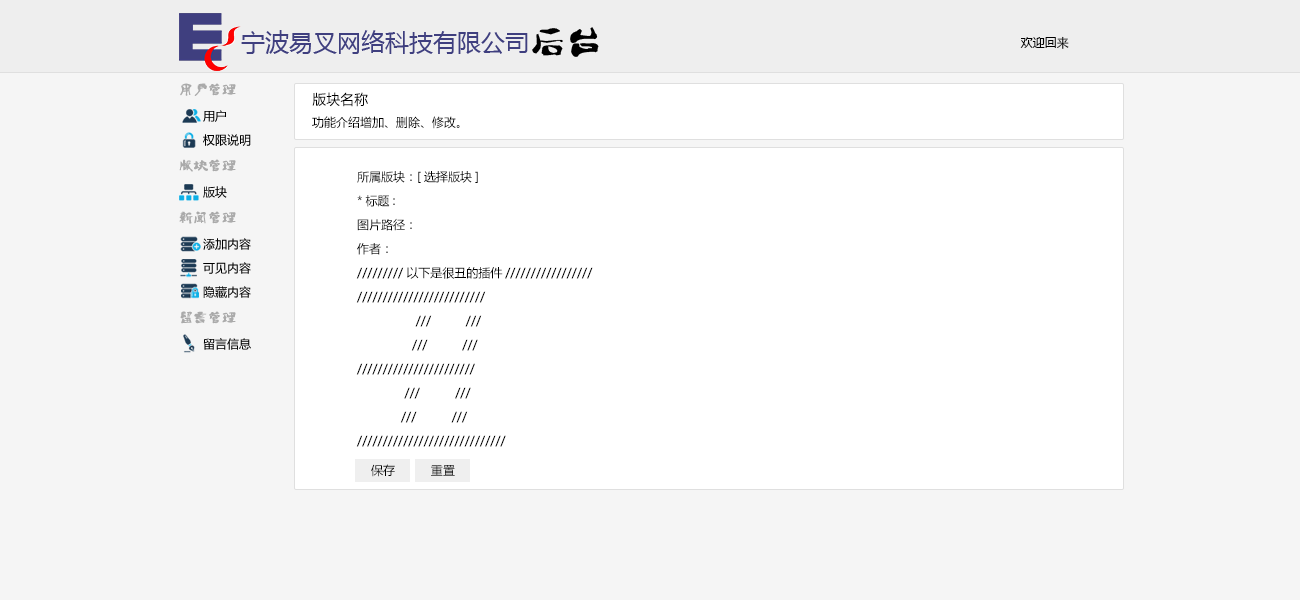
<style>
.page{position:relative;width:1300px;height:600px;background:#f5f5f5}
.page>*{position:absolute;margin:0}
.t1{font:36px "3500-";color:#000000}
.t2{font:12px "MicrosoftYaHei";color:#000000}
.t3{font:12px/24px "MicrosoftYaHei";color:#000000}
.t4{font:14px/28px "3500-";color:#aaaaaa;font-weight:bold}
.t5{font:14px/24px "MicrosoftYaHei";color:#000000}
.t6{font:12px "MicrosoftYaHei"}
</style>
<div class="page">
<p class="t1" style="left:532px;top:27px;width:67px;height:30px">后台</p>
<p class="t2" style="left:1020px;top:36px;width:49px;height:13px">欢迎回来</p>
<p class="t3" style="left:179px;top:83px;width:72px;height:267px"><span class="t4">用户管理<br></span>用户<br>权限说明<br><span class="t4">版块管理<br></span>版块<br><span class="t4">新闻管理<br></span>添加内容<br>可见内容<br>隐藏内容<br><span class="t4">留言管理<br></span>留言信息</p>
<p class="t3" style="left:312px;top:92px;width:148px;height:37px"><span class="t5">版块名称<br></span>功能介绍增加、删除、修改。</p>
<p class="t3" style="left:356px;top:171px;width:237px;height:276px">所属版块：[选择版块]<br>*标题:<br>图片路径：<br>作者：<br>/////////以下是很丑的插件/////////////////<br>/////////////////////////<br>     ///        ///<br>    ///       ///<br>///////////////////////<br>           ///     ///<br>          ///    ///<br>/////////////////////////////</p>
<p class="t2" style="left:371px;top:464px;width:24px;height:13px">保存</p>
<p class="t6" style="left:431px;top:465px;width:24px;height:11px">重置</p>
</div>
